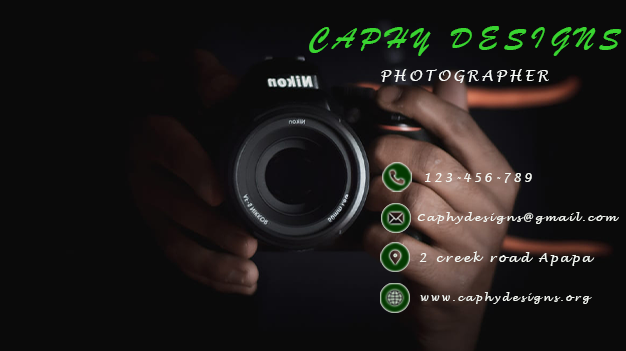
<style>
.page{position:relative;width:626px;height:351px;background:#0a0a0a}
.page>*{position:absolute;margin:0}
.t1{font:31.5px "BrushScriptMT";letter-spacing:0.2em;color:#39d430}
.t2{font:14.8px "LucidaHandwriting-Italic";letter-spacing:0.2em;color:#f7faf8}
.t3{font:12px "LucidaHandwriting-Italic";letter-spacing:0.2em;color:#f3f6f1}
.t4{font:10.4px "LucidaHandwriting-Italic";letter-spacing:0.2em;color:#f3f6f1}
</style>
<div class="page">
<p class="t1" style="left:309px;top:26px;width:313px;height:30px">CAPHY DESIGNS</p>
<p class="t2" style="left:381px;top:69px;width:168px;height:14px">PHOTOGRAPHER</p>
<p class="t3" style="left:425px;top:173px;width:107px;height:10px">123-456-789</p>
<p class="t4" style="left:417px;top:212px;width:202px;height:12px">Caphydesigns@gmail.com</p>
<p class="t3" style="left:419px;top:251px;width:176px;height:15px">2 creek road Apapa</p>
<p class="t4" style="left:420px;top:292px;width:172px;height:12px">www.caphydesigns.org</p>
</div>
